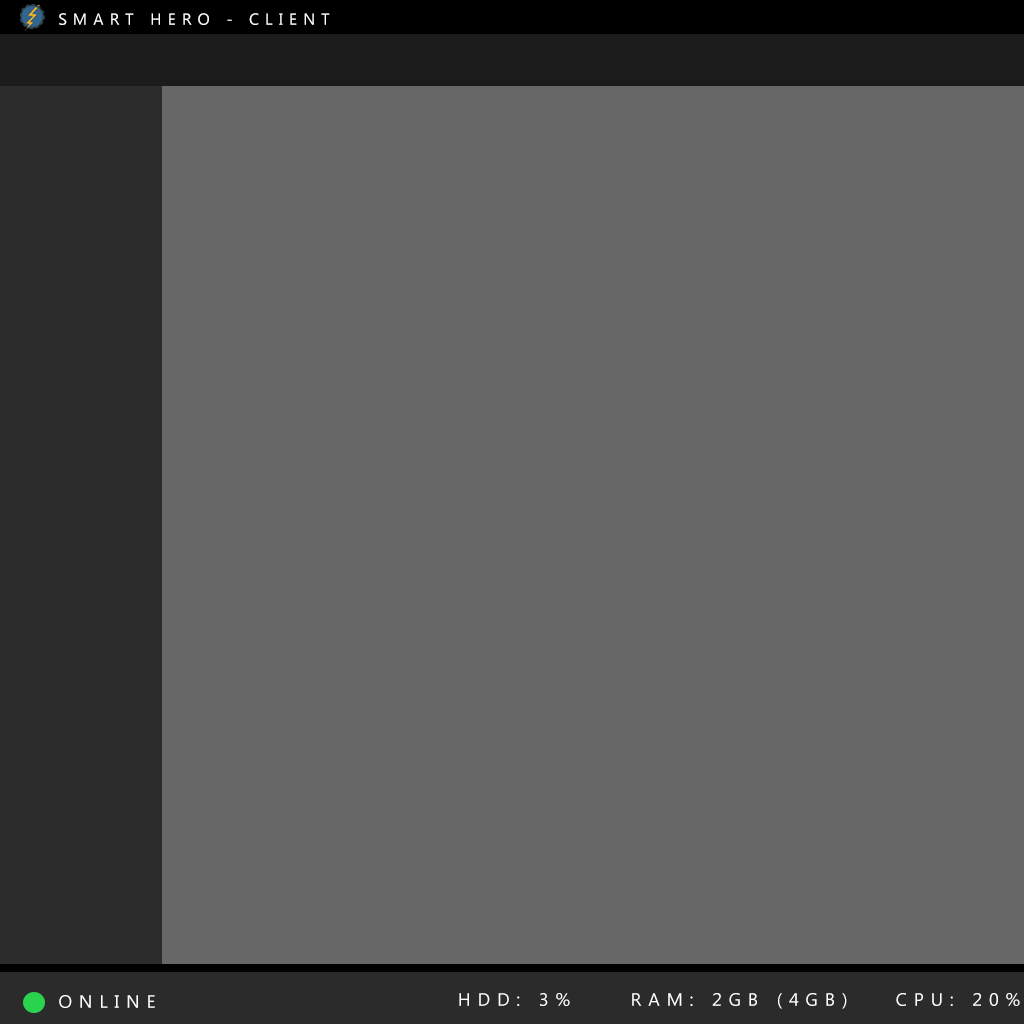
<style>
.page{position:relative;width:1024px;height:1024px;background:#676767}
.page>*{position:absolute;margin:0}
.t1{font:16px "MicrosoftTaiLe";letter-spacing:0.38em;color:#ffffff;text-transform:uppercase}
.t2{font:18px "MicrosoftTaiLe";letter-spacing:0.38em;color:#ffffff;text-transform:uppercase}
</style>
<div class="page">
<p class="t1" style="left:59px;top:13px;width:271px;height:12px">SMART HERO - CLIENT</p>
<p class="t2" style="left:59px;top:995px;width:96px;height:13px">ONLINE</p>
<p class="t2" style="left:459px;top:993px;width:111px;height:13px">HDD: 3%</p>
<p class="t2" style="left:632px;top:993px;width:215px;height:16px">RAM: 2GB (4GB)</p>
<p class="t2" style="left:896px;top:993px;width:124px;height:13px">cpu: 20%</p>
</div>
